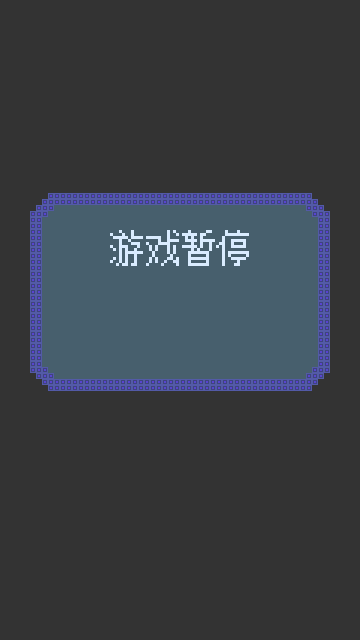
<style>
.page{position:relative;width:360px;height:640px;background:#333333}
.page>*{position:absolute;margin:0}
.t1{font:36px "FZXS12--GB1-0";color:#daecff}
</style>
<div class="page">
<p class="t1" style="left:110px;top:230px;width:139px;height:36px">游戏暂停</p>
</div>
